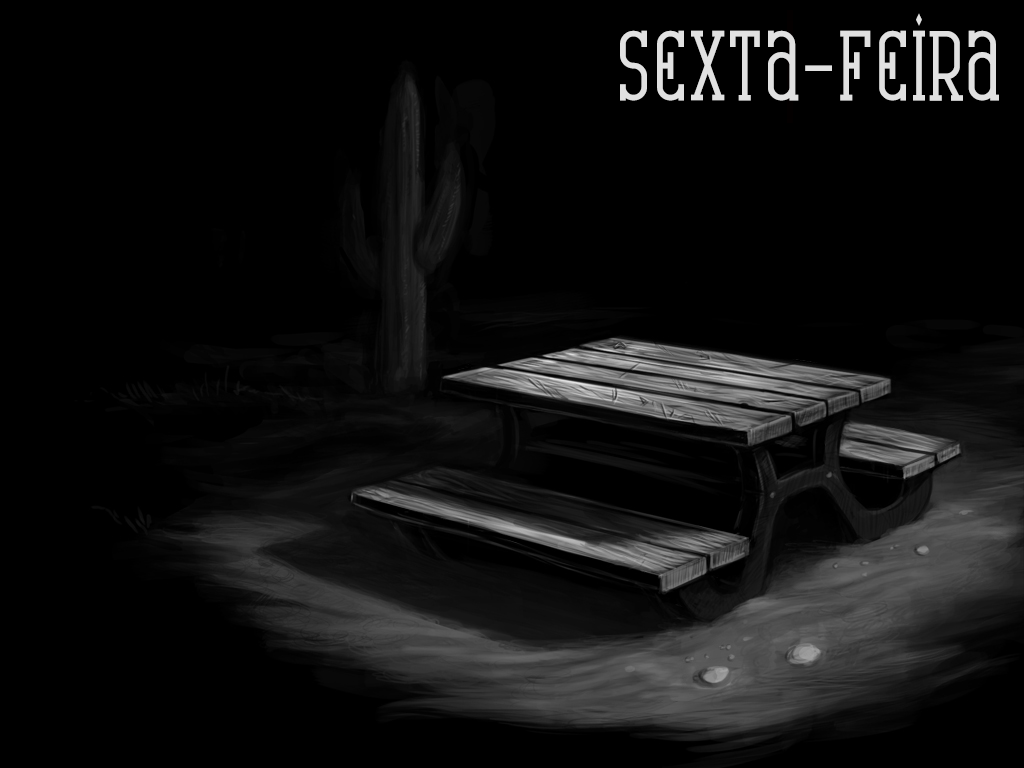
<style>
.page{position:relative;width:1024px;height:768px;background:#000000}
.page>*{position:absolute;margin:0}
.t1{font:106.7px "CatharsisRequiemBold";letter-spacing:-0.003em;color:#e1e1e1}
</style>
<div class="page">
<p class="t1" style="left:620px;top:13px;width:379px;height:88px">sexta-feira</p>
</div>
